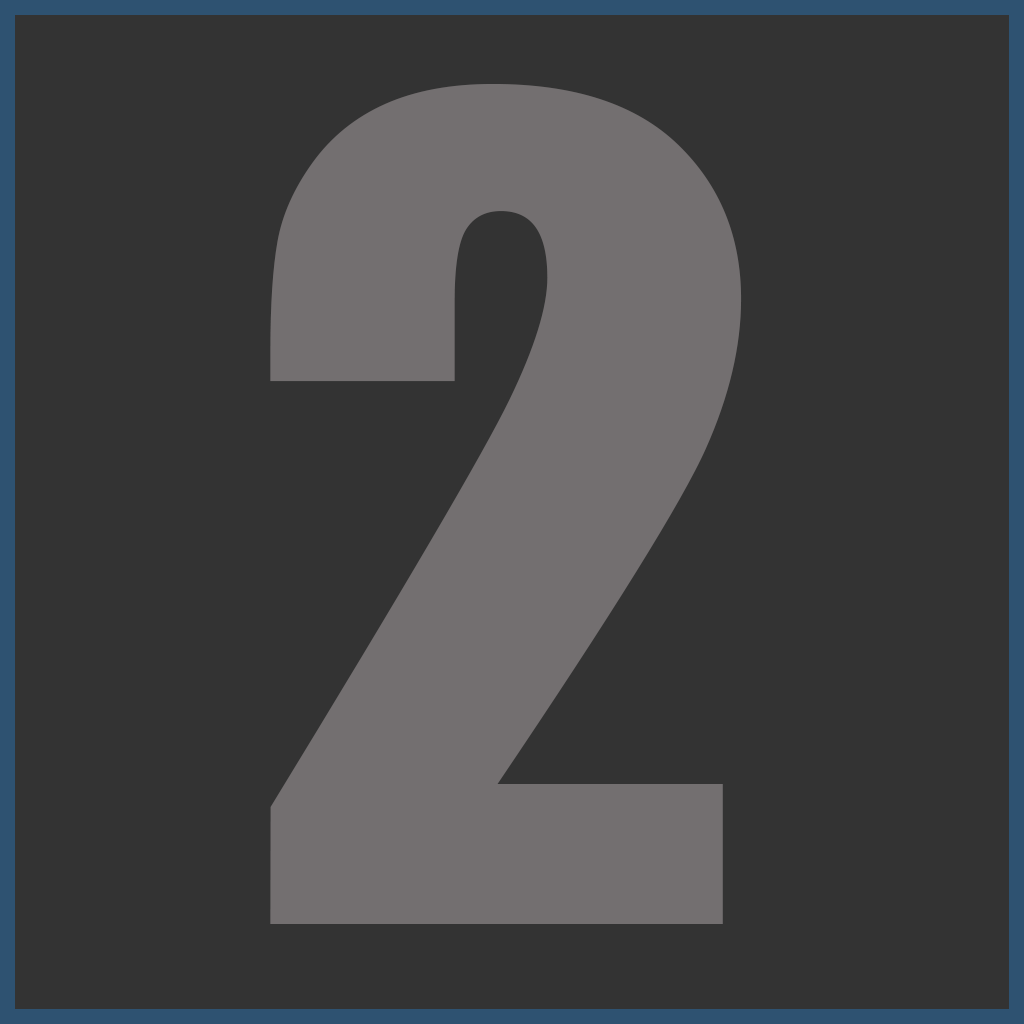
<style>
.page{position:relative;width:1024px;height:1024px;background:#333333}
.page>*{position:absolute;margin:0}
.t1{font:1041.7px "Impact";color:#736f70}
</style>
<div class="page">
<p class="t1" style="left:270px;top:84px;width:472px;height:840px">2</p>
</div>
